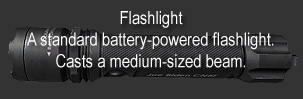
<style>
.page{position:relative;width:303px;height:99px;background:#333333}
.page>*{position:absolute;margin:0}
.t1{font:18px "ArialNarrow";color:#ffffff}
</style>
<div class="page">
<p class="t1" style="left:27px;top:11px;width:247px;height:57px;text-align:center">Flashlight<br>A standard battery-powered flashlight.<br>Casts a medium-sized beam.</p>
</div>
